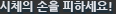
<style>
.page{position:relative;width:116px;height:14px;background:#21303a}
.page>*{position:absolute;margin:0}
.t1{font:12px "NanumGothicExtraBold";color:#dee1e7}
</style>
<div class="page">
<p class="t1" style="left:0px;top:0px;width:112px;height:12px">시체의 손을 피하세요!</p>
</div>
